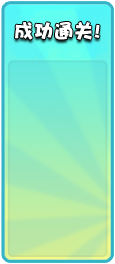
<style>
.page{position:relative;width:115px;height:264px}
.page>*{position:absolute;margin:0}
.t1{font:20px "DFPHaiBaoW12";color:#ffffff}
</style>
<div class="page">
<p class="t1" style="left:15px;top:21px;width:85px;height:19px">成功通关!</p>
</div>
